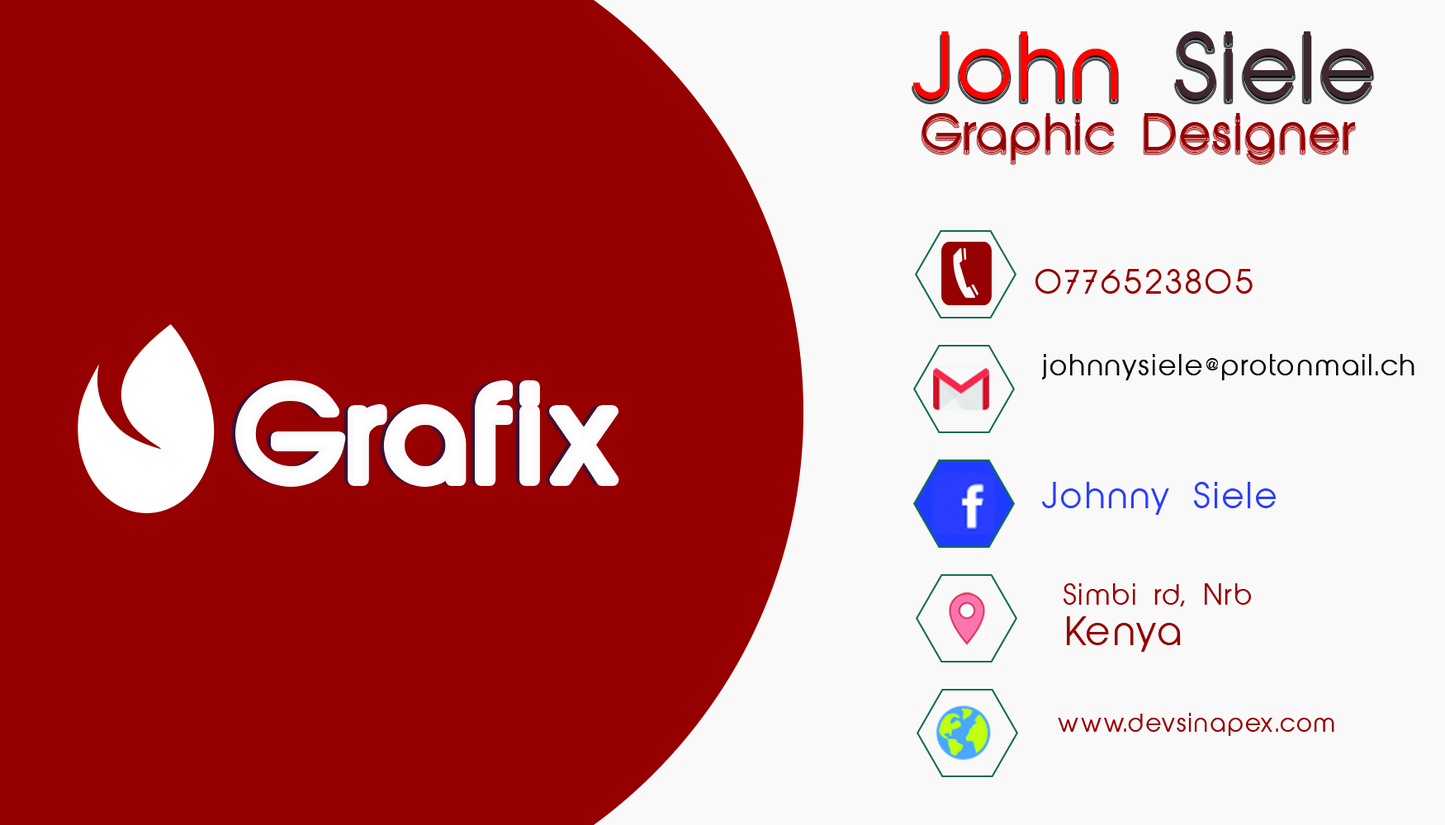
<style>
.page{position:relative;width:1445px;height:825px;background:#960000}
.page>*{position:absolute;margin:0}
.t1{font:85.8px "AbeatbyKai";letter-spacing:0.05em;color:#3f2732}
.t2{font:85.8px "AbeatbyKai";letter-spacing:0.05em;color:#ff0100}
.t3{font:47.7px "AbeatbyKai";letter-spacing:0.05em;color:#960000}
.t4{font:53.1px "AbeatbyKai";letter-spacing:0.09em;color:#960000}
.t5{font:45.9px "AbeatbyKai";letter-spacing:0.09em;color:#0b0b0d}
.t6{font:120.4px "AbeatbyKai";letter-spacing:0.09em;color:#ffffff}
.t7{font:57.4px "AbeatbyKai";letter-spacing:0.09em;color:#2a3eff}
.t8{font:45.9px "AbeatbyKai";letter-spacing:0.09em;color:#960000}
.t9{font:63.1px "AbeatbyKai";letter-spacing:0.09em;color:#960000}
.t10{font:40.2px "AbeatbyKai";letter-spacing:0.09em;color:#960000}
</style>
<div class="page">
<p class="t1" style="left:913px;top:31px;width:460px;height:68px"><span class="t2">John </span>Siele</p>
<p class="t3" style="left:922px;top:113px;width:433px;height:47px">Graphic Designer</p>
<p class="t4" style="left:1035px;top:269px;width:217px;height:25px">0776523805</p>
<p class="t5" style="left:1042px;top:354px;width:372px;height:27px">johnnysiele@protonmail.ch</p>
<p class="t6" style="left:241px;top:386px;width:372px;height:96px">Grafix</p>
<p class="t7" style="left:1042px;top:482px;width:233px;height:33px">Johnny Siele</p>
<p class="t8" style="left:1063px;top:584px;width:188px;height:23px">Simbi rd, Nrb</p>
<p class="t9" style="left:1066px;top:617px;width:114px;height:35px">Kenya</p>
<p class="t10" style="left:1057px;top:713px;width:277px;height:23px">www.devsinapex.com</p>
</div>
